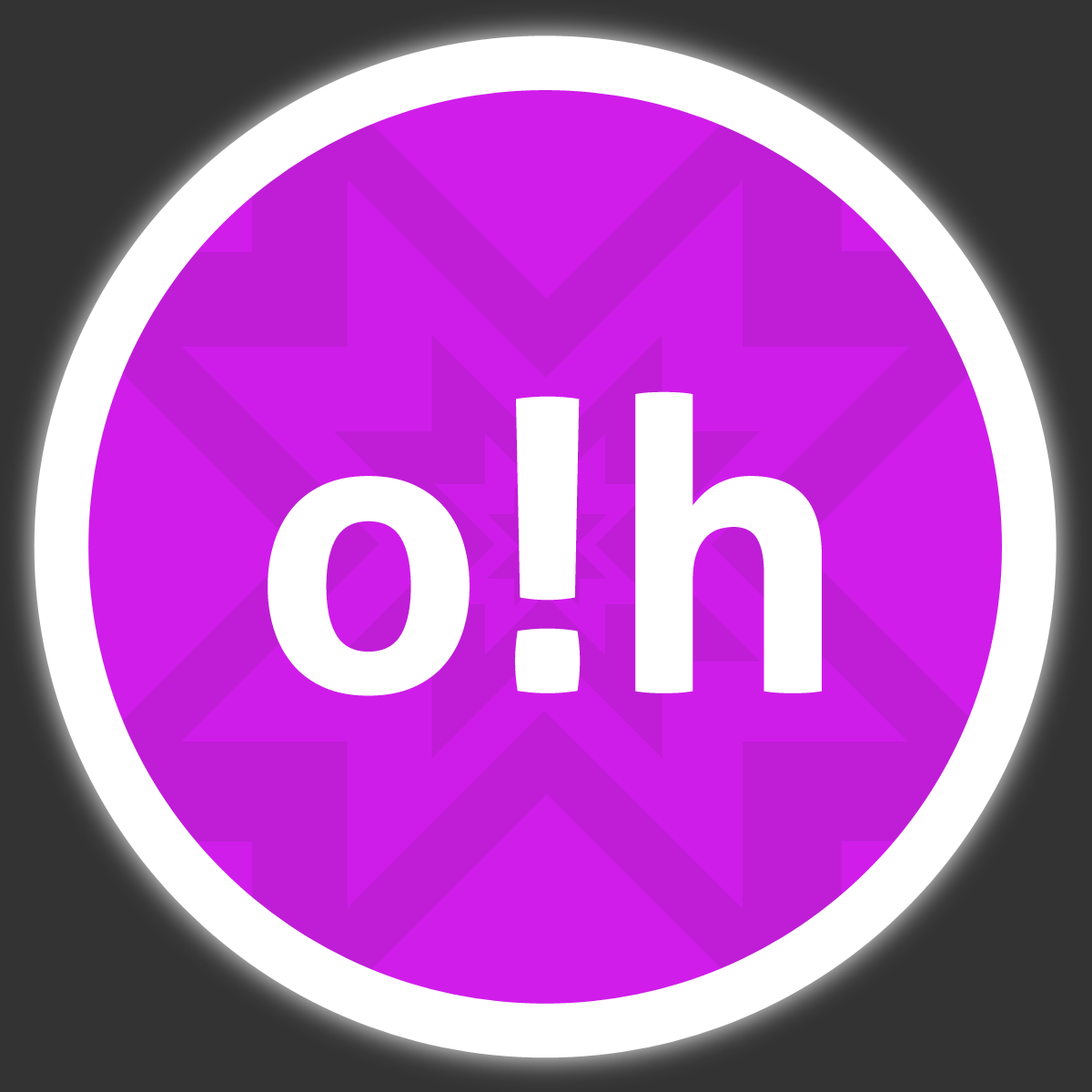
<style>
.page{position:relative;width:1092px;height:1092px;background:#333333}
.page>*{position:absolute;margin:0}
.t1{font:405.6px "Aller-Bold";color:#ffffff}
</style>
<div class="page">
<p class="t1" style="left:268px;top:391px;width:554px;height:305px">o!h</p>
</div>
